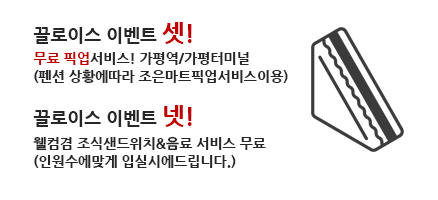
<style>
.page{position:relative;width:438px;height:200px;background:#ffffff}
.page>*{position:absolute;margin:0}
.t1{font:14px/2px "NanumGothicExtraBold";color:#262626}
.t2{font:18px/30px "NanumGothicExtraBold";color:#262626}
.t3{font:24px/30px "NanumGothicExtraBold";color:#c00000}
.t4{font:14px/18px "NanumGothicExtraBold";color:#c00000}
.t5{font:14px/18px "NanumGothicExtraBold";color:#262626}
.t6{font:18px/32px "NanumGothicExtraBold";color:#262626}
.t7{font:24px/32px "NanumGothicExtraBold";color:#c00000}
.t8{font:14px/36px "NanumGothicExtraBold";color:#262626}
</style>
<div class="page">
<p class="t1" style="left:33px;top:22px;width:255px;height:62px"><span class="t2">끌로이스 이벤트 </span><span class="t3">셋!<br></span><span class="t4">무료 픽업</span><span class="t5">서비스! 가평역/가평터미널<br></span>(펜션 상황에따라 조은마트픽업서비스이용)</p>
<p class="t5" style="left:33px;top:105px;width:233px;height:63px"><span class="t6">끌로이스 이벤트 </span><span class="t7">넷!<br></span>웰컴겸 조식샌드위치&amp;음료 서비스 무료<br><span class="t8">(인원수에맞게 입실시에드립니다.)</span></p>
</div>
